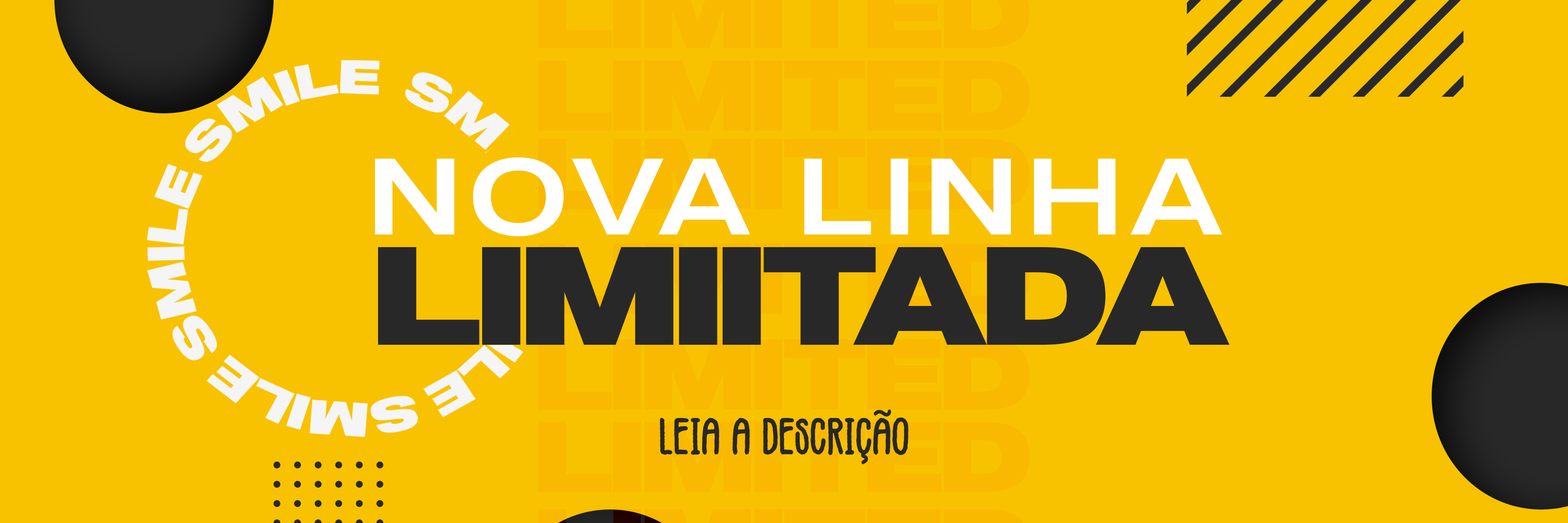
<style>
.page{position:relative;width:1568px;height:523px;background:#f8c200}
.page>*{position:absolute;margin:0}
.t1{font:100.2px "MADEOuterSans-Black";letter-spacing:-0.04em;color:#f8b900}
.t2{font:108.3px "MADEOuterSans";letter-spacing:0.075em;color:#ffffff}
.t3{font:139.2px "MADEOuterSans-Black";letter-spacing:-0.04em;color:#282828}
.t4{font:52.1px "Vintages";letter-spacing:-0.01em;color:#282828}
</style>
<div class="page">
<p class="t1" style="left:538px;top:61px;width:491px;height:70px">LIMITED</p>
<p class="t2" style="left:375px;top:157px;width:848px;height:79px">NOVA LINHA</p>
<p class="t3" style="left:378px;top:247px;width:852px;height:98px">LIMIITADA</p>
<p class="t4" style="left:660px;top:417px;width:249px;height:38px">LEIA A DESCRICAO</p>
</div>
